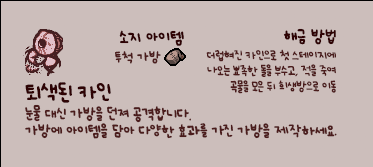
<style>
.page{position:relative;width:373px;height:167px;background:#ccbebb}
.page>*{position:absolute;margin:0}
.t1{font:12px "UhBeeSe_hyunBold";color:#2e0304}
.t2{font:12px "UhBeeSe_hyunBold";letter-spacing:-0.1em;color:#2e0304}
.t3{font:12px "UhBeeSe_hyunBold";letter-spacing:-0.15em;color:#2e0304}
.t4{font:10px "UhBeeSe_hyunBold";color:#4b1c1c}
.t5{font:9px/16px "UhBeeSe_hyunBold";letter-spacing:-0.05em;color:#4b1c1c}
.t6{font:9px/14.5px "UhBeeSe_hyunBold";letter-spacing:-0.05em;color:#4b1c1c}
.t7{font:11px/17px "UhBeeSe_hyunBold";letter-spacing:-0.025em;color:#4b1c1c}
.t8{font:15.2px/24px "UhBeeSe_hyunBold";letter-spacing:-0.1em;color:#2e0304;scale:1.05 1}
.t9{font:16px/24px "UhBeeSe_hyunBold";letter-spacing:-0.05em;color:#2e0304}
.t10{font:16px/24px "UhBeeSe_hyunBold";letter-spacing:-0.025em;color:#2e0304}
.t11{font:11px/17px "UhBeeSe_hyun";letter-spacing:-0.025em;color:#4b1c1c}
.t12{font:11px/16px "UhBeeSe_hyunBold";letter-spacing:-0.025em;color:#4b1c1c}
.t13{font:11px/16px "UhBeeSe_hyunBold";letter-spacing:-0.125em;color:#4b1c1c}
.t14{font:11px/16px "UhBeeSe_hyunBold";letter-spacing:-0.15em;color:#4b1c1c}
</style>
<div class="page">
<p class="t1" style="left:119px;top:30px;width:65px;height:16px"><span class="t2">소</span>지 아이템</p>
<p class="t1" style="left:283px;top:28px;width:53px;height:17px">해금 방<span class="t3">법</span></p>
<p class="t4" style="left:115px;top:51px;width:46px;height:13px">투척 가방</p>
<p class="t5" style="left:206px;top:49px;width:130px;height:45px;text-align:right"><span class="t6">더럽혀진 카인으로 첫 스테이지에<br></span>나오는 뾰족한 돌을 부수고, 적을 죽여<br><span class="t6">곡물을 모은 뒤 희생방으로 이동</span></p>
<p class="t7" style="left:25px;top:82px;width:312px;height:57px"><span class="t8">토</span><span class="t9">ㅣ</span><span class="t10">색</span><span class="t9">된 카인<br></span>눈물 대신 가방을 던져 <span class="t11">공격</span>합니다.<br><span class="t12">가방에 아이템을 담아 </span><span class="t13">다</span><span class="t12">양한 효과를 </span><span class="t14">가</span><span class="t12">진 가방을 제작하세요.</span></p>
</div>
